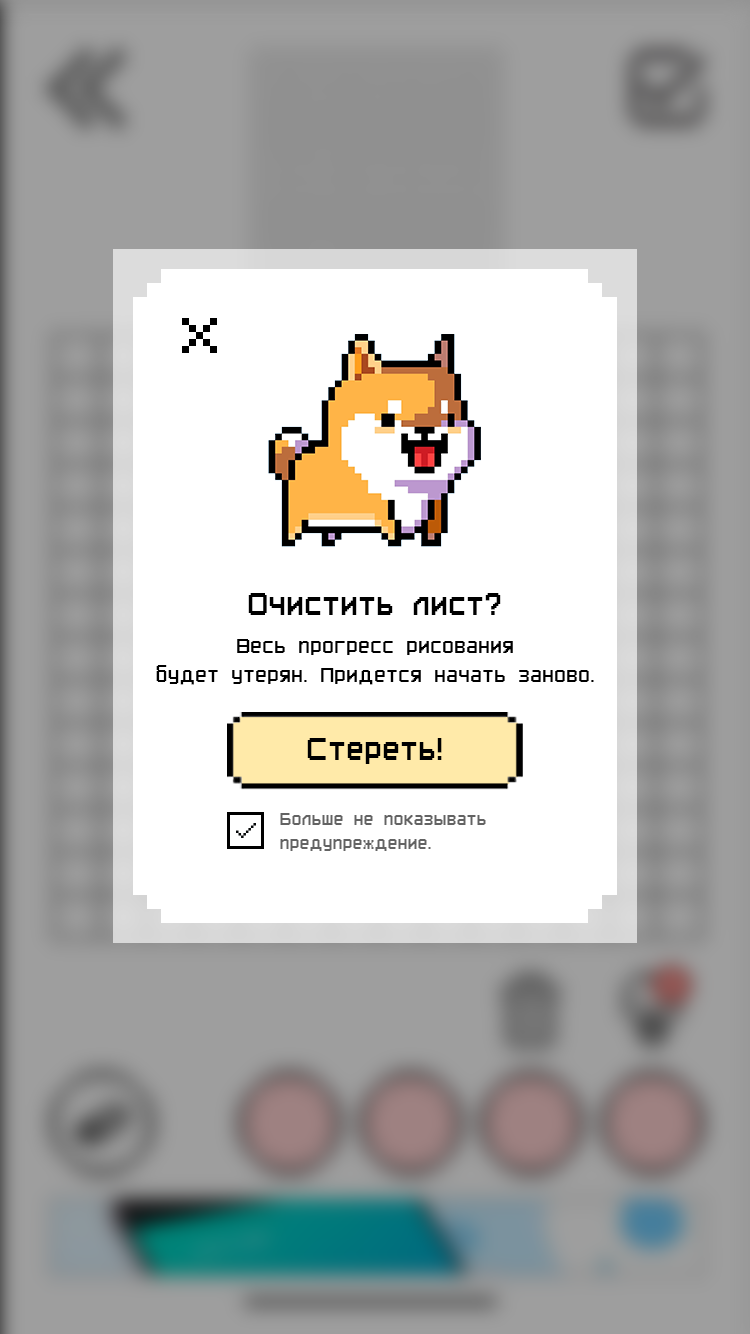
<style>
.page{position:relative;width:750px;height:1334px;background:#ffffff}
.page>*{position:absolute;margin:0}
.t1{font:36px "PixelFont-7";color:#000000}
.t2{font:24px "PixelFont-7";color:#000000}
.t3{font:20px "PixelFont-7";color:#636363}
</style>
<div class="page">
<p class="t1" style="left:248px;top:593px;width:253px;height:22px">Очистить лист?</p>
<p class="t2" style="left:156px;top:639px;width:438px;height:46px;text-align:center">Весь прогресс рисования<br>будет утерян. Придется начать заново.</p>
<p class="t1" style="left:307px;top:738px;width:135px;height:26px">Стереть!</p>
<p class="t3" style="left:280px;top:813px;width:206px;height:38px">Больше не показывать <br>предупреждение.</p>
</div>
